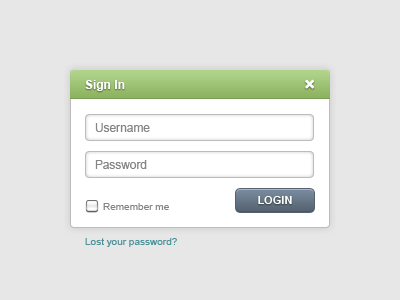
<style>
.page{position:relative;width:400px;height:300px;background:#e7e7e7}
.page>*{position:absolute;margin:0}
.t1{font:12px "Arial-BoldMT";color:#ffffff}
.t2{font:12px "ArialMT";color:#858585}
.t3{font:11px "Arial-BoldMT";color:#ffffff}
.t4{font:10px "ArialMT";color:#858585}
.t5{font:10px "ArialMT";color:#4d9299}
</style>
<div class="page">
<p class="t1" style="left:85px;top:80px;width:40px;height:11px">Sign In</p>
<p class="t2" style="left:95px;top:123px;width:55px;height:9px">Username</p>
<p class="t2" style="left:95px;top:160px;width:52px;height:9px">Password</p>
<p class="t3" style="left:258px;top:196px;width:34px;height:8px">LOGIN</p>
<p class="t4" style="left:103px;top:203px;width:66px;height:7px">Remember me</p>
<p class="t5" style="left:85px;top:238px;width:92px;height:9px">Lost your password?</p>
</div>
